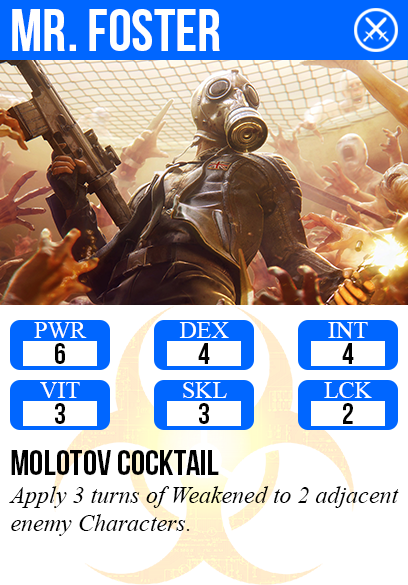
<style>
.page{position:relative;width:408px;height:585px;background:#ffffff}
.page>*{position:absolute;margin:0}
.t1{font:60px "BebasNeue";color:#ffffff}
.t2{font:24px "TimesNewRomanPSMT";color:#ffffff}
.t3{font:30px "BebasNeue";color:#000000}
.t4{font:36px "BebasNeue";color:#000000}
.t5{font:24px "TimesNewRomanPS-ItalicMT";color:#000000}
</style>
<div class="page">
<p class="t1" style="left:12px;top:9px;width:208px;height:42px">mr. foster</p>
<p class="t2" style="left:34px;top:322px;width:53px;height:16px">PWR</p>
<p class="t2" style="left:179px;top:322px;width:50px;height:16px">DEX</p>
<p class="t2" style="left:328px;top:322px;width:40px;height:17px">INT</p>
<p class="t3" style="left:55px;top:343px;width:10px;height:21px">6</p>
<p class="t3" style="left:198px;top:343px;width:12px;height:21px">4</p>
<p class="t3" style="left:342px;top:343px;width:12px;height:21px">4</p>
<p class="t2" style="left:40px;top:382px;width:40px;height:16px">VIT</p>
<p class="t2" style="left:183px;top:382px;width:44px;height:16px">SKL</p>
<p class="t2" style="left:324px;top:382px;width:48px;height:16px">LCK</p>
<p class="t3" style="left:55px;top:403px;width:10px;height:21px">3</p>
<p class="t3" style="left:199px;top:403px;width:10px;height:21px">3</p>
<p class="t3" style="left:343px;top:403px;width:10px;height:21px">2</p>
<p class="t4" style="left:11px;top:450px;width:208px;height:25px">molotov cocktail</p>
<p class="t5" style="left:9px;top:486px;width:390px;height:50px">Apply 3 turns of Weakened to 2 adjacent<br>enemy Characters.</p>
</div>
